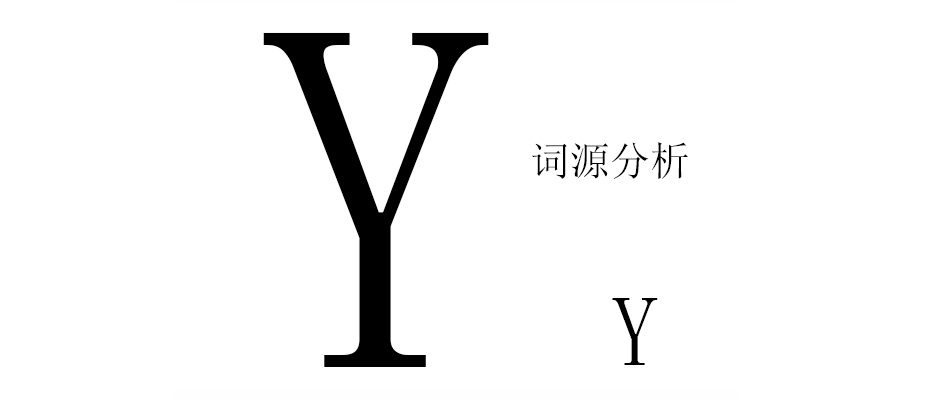
<style>
.page{position:relative;width:940px;height:400px;background:#ffffff}
.page>*{position:absolute;margin:0}
.t1{font:500px "SimSun";color:#000000}
.t2{font:40.1px "SimSun";color:#000000}
.t3{font:100px "SimSun";color:#000000}
</style>
<div class="page">
<p class="t1" style="left:263px;top:32px;width:226px;height:335px">Y</p>
<p class="t2" style="left:532px;top:142px;width:156px;height:37px">词源分析</p>
<p class="t3" style="left:612px;top:298px;width:46px;height:67px">Y</p>
</div>
